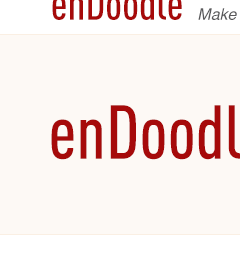
<style>
.page{position:relative;width:240px;height:280px;background:#fdf9f5}
.page>*{position:absolute;margin:0}
.t1{font:45px "DINCond-Medium";color:#a60a0a}
.t2{font:16px "Helvetica-Oblique";color:#59595b}
.t3{font:75px "DINCond-Medium";color:#a60a0a}
</style>
<div class="page">
<p class="t1" style="left:52px;top:0px;width:130px;height:20px">enDoodle</p>
<p class="t2" style="left:198px;top:8px;width:39px;height:12px">Make Art Together</p>
<p class="t3" style="left:51px;top:105px;width:189px;height:55px">enDoodle</p>
</div>
